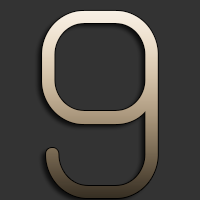
<style>
.page{position:relative;width:200px;height:200px;background:#333333}
.page>*{position:absolute;margin:0}
.t1{font:247.6px "GreyscaleBasic-Regular";scale:0.95 1}
</style>
<div class="page">
<p class="t1" style="left:42px;top:10px;width:116px;height:188px">9</p>
</div>
